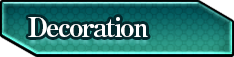
<style>
.page{position:relative;width:234px;height:57px}
.page>*{position:absolute;margin:0}
.t1{font:27px "RyuminPro-ExBold";letter-spacing:-0.08em;color:#ffffff}
</style>
<div class="page">
<p class="t1" style="left:28px;top:17px;width:120px;height:20px">Decoration</p>
</div>
